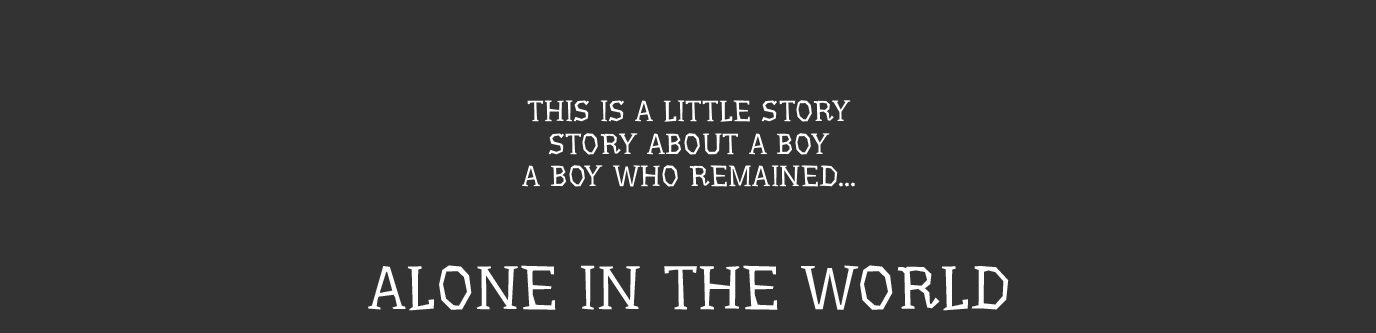
<style>
.page{position:relative;width:1376px;height:333px;background:#333333}
.page>*{position:absolute;margin:0}
.t1{font:29px/32.7px "Underdog";letter-spacing:0.01em;color:#ffffff;text-transform:uppercase}
.t2{font:61px/89.7px "Underdog";letter-spacing:0.01em;color:#ffffff;text-transform:uppercase}
</style>
<div class="page">
<p class="t1" style="left:368px;top:100px;width:641px;height:211px;text-align:center">This is a LITTLE story<br>STORY About a boy<br>A BOY WHO remained...<br><br><span class="t2">alone in the world</span></p>
</div>
